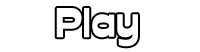
<style>
.page{position:relative;width:200px;height:52px;background:#ffffff}
.page>*{position:absolute;margin:0}
.t1{font:40px "Glockenspiel";color:#ffffff}
</style>
<div class="page">
<p class="t1" style="left:56px;top:8px;width:82px;height:39px">Play</p>
</div>
